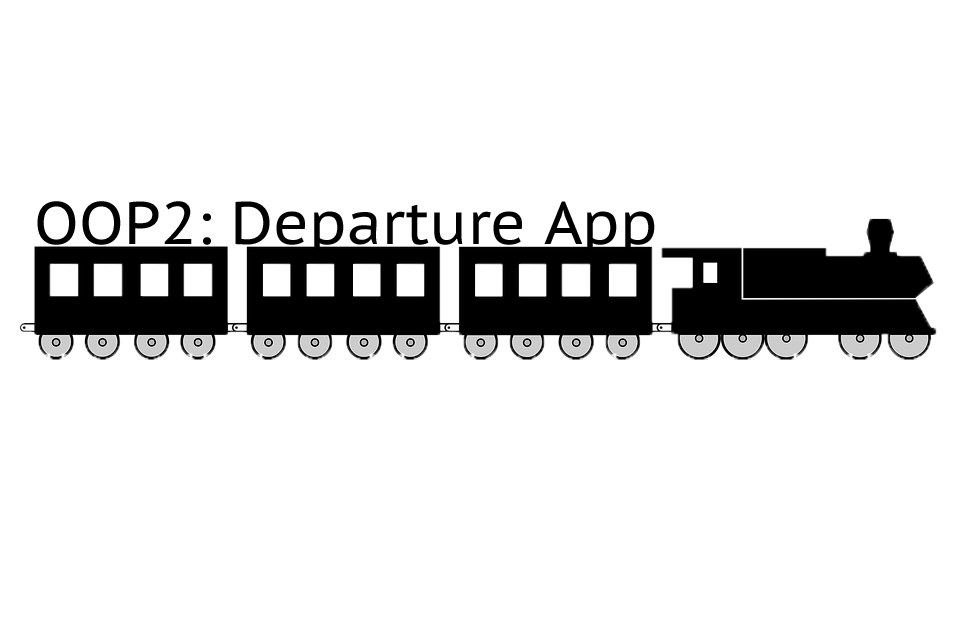
<style>
.page{position:relative;width:960px;height:644px;background:#ffffff}
.page>*{position:absolute;margin:0}
.t1{font:60px "PTSans-Caption";color:#000000}
</style>
<div class="page">
<p class="t1" style="left:37px;top:201px;width:618px;height:55px">OOP2: Departure App</p>
</div>
